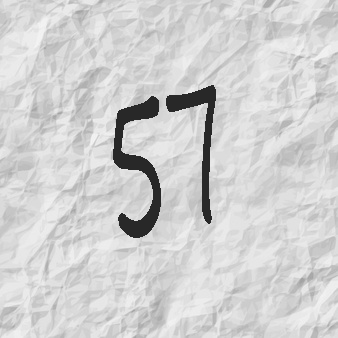
<style>
.page{position:relative;width:338px;height:338px}
.page>*{position:absolute;margin:0}
.t1{font:206.4px "SegoeScript";color:#282828;scale:0.43 1}
</style>
<div class="page">
<p class="t1" style="left:113px;top:85px;width:103px;height:153px;rotate:-11deg">57</p>
</div>
